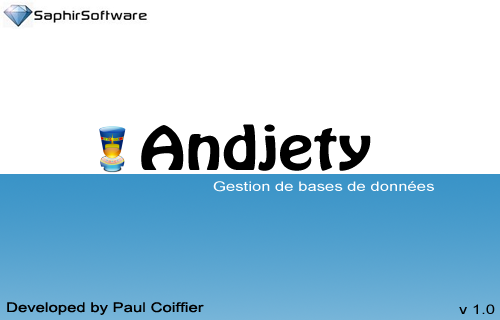
<style>
.page{position:relative;width:500px;height:320px;background:#ffffff}
.page>*{position:absolute;margin:0}
.t1{font:53.3px "HoboStd";color:#000000;scale:1.25 1}
.t2{font:13.3px "ArialMT";color:#ffffff;scale:1.25 1}
.t3{font:13.3px "ArialMT";color:#000000;scale:1.25 1}
</style>
<div class="page">
<p class="t1" style="left:141px;top:124px;width:230px;height:47px">Andjety</p>
<p class="t2" style="left:213px;top:181px;width:221px;height:11px">Gestion de bases de données</p>
<p class="t3" style="left:7px;top:302px;width:197px;height:13px">Developed by Paul Coiffier</p>
<p class="t3" style="left:459px;top:304px;width:36px;height:10px">v 1.0</p>
</div>
